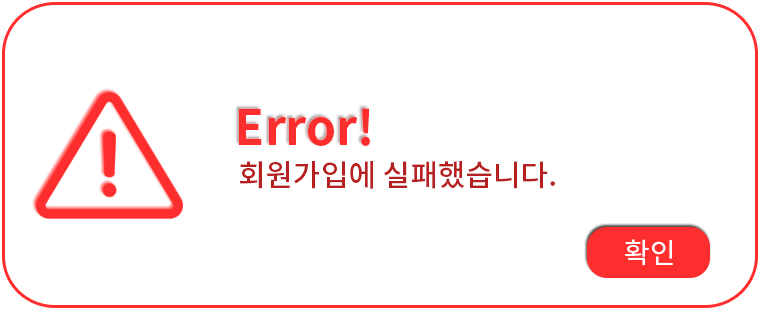
<style>
.page{position:relative;width:760px;height:310px;background:#ffffff}
.page>*{position:absolute;margin:0}
.t1{font:48px "NotoSansKR-Bold";color:#ff2e2e}
.t2{font:30px "NotoSansKR-Medium";color:#b61f1f}
.t3{font:28px "NotoSansKR-Regular";color:#ffffff}
</style>
<div class="page">
<p class="t1" style="left:239px;top:108px;width:131px;height:38px">Error!</p>
<p class="t2" style="left:239px;top:161px;width:316px;height:28px">회원가입에 실패했습니다.</p>
<p class="t3" style="left:625px;top:239px;width:48px;height:27px">확인</p>
</div>
